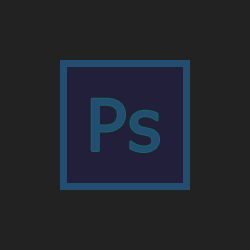
<style>
.page{position:relative;width:250px;height:250px;background:#222222}
.page>*{position:absolute;margin:0}
.t1{font:72px "Tahoma";letter-spacing:0.025em;color:#234d71}
</style>
<div class="page">
<p class="t1" style="left:91px;top:98px;width:68px;height:54px">Ps</p>
</div>
